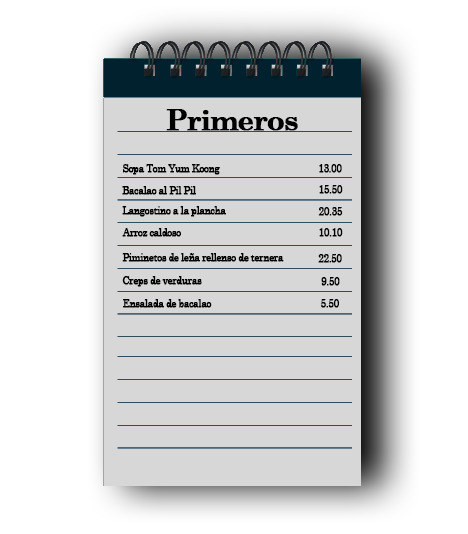
<style>
.page{position:relative;width:468px;height:534px;background:#d7d7d7}
.page>*{position:absolute;margin:0}
.t1{font:29px "CenturySchoolbook-Bold";letter-spacing:-0.06em;color:#000000;font-weight:bold}
.t2{font:10px "CenturySchoolbook";letter-spacing:-0.06em;color:#000000;font-weight:bold}
</style>
<div class="page">
<p class="t1" style="left:166px;top:109px;width:132px;height:22px">Primeros</p>
<p class="t2" style="left:123px;top:164px;width:97px;height:11px">Sopa Tom Yum Koong</p>
<p class="t2" style="left:319px;top:164px;width:23px;height:9px">13.00</p>
<p class="t2" style="left:319px;top:185px;width:24px;height:9px">15.50</p>
<p class="t2" style="left:122px;top:186px;width:74px;height:9px">Bacalao al Pil Pil</p>
<p class="t2" style="left:122px;top:206px;width:104px;height:11px">Langostino a la plancha</p>
<p class="t2" style="left:318px;top:207px;width:25px;height:9px">20.35</p>
<p class="t2" style="left:122px;top:228px;width:59px;height:9px">Arroz caldoso</p>
<p class="t2" style="left:319px;top:228px;width:24px;height:9px">10.10</p>
<p class="t2" style="left:122px;top:253px;width:162px;height:9px">Piminetos de leña rellenso de ternera</p>
<p class="t2" style="left:318px;top:254px;width:24px;height:9px">22.50</p>
<p class="t2" style="left:122px;top:276px;width:80px;height:11px">Creps de verduras</p>
<p class="t2" style="left:321px;top:277px;width:19px;height:9px">9.50</p>
<p class="t2" style="left:123px;top:299px;width:89px;height:9px">Ensalada de bacalao</p>
<p class="t2" style="left:321px;top:299px;width:18px;height:9px">5.50</p>
</div>
